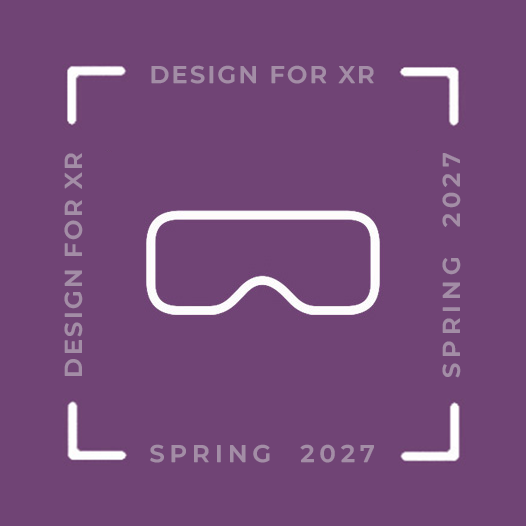
<style>
.page{position:relative;width:526px;height:526px;background:#704475}
.page>*{position:absolute;margin:0}
.t1{font:24px "Montserrat-SemiBold";letter-spacing:0.1em;color:#a38da6}
.t2{font:24px "Montserrat-SemiBold";letter-spacing:0.22em;color:#a38da6}
</style>
<div class="page">
<p class="t1" style="left:151px;top:65px;width:223px;height:19px">DESIGN FOR XR</p>
<p class="t1" style="left:64px;top:153px;width:19px;height:223px;rotate:-90deg">DESIGN FOR XR</p>
<p class="t2" style="left:442px;top:153px;width:19px;height:225px;rotate:-90deg">SPRING  2027</p>
<p class="t2" style="left:150px;top:444px;width:224px;height:19px">SPRING  2027</p>
</div>
